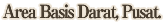
<style>
.page{position:relative;width:168px;height:22px;background:#ffffff}
.page>*{position:absolute;margin:0}
.t1{font:18px "RyuminPro-ExBold";letter-spacing:-0.08em;color:#534738;scale:0.9 1}
</style>
<div class="page">
<p class="t1" style="left:2px;top:4px;width:159px;height:17px">Area Basis Darat, Pusat.</p>
</div>
